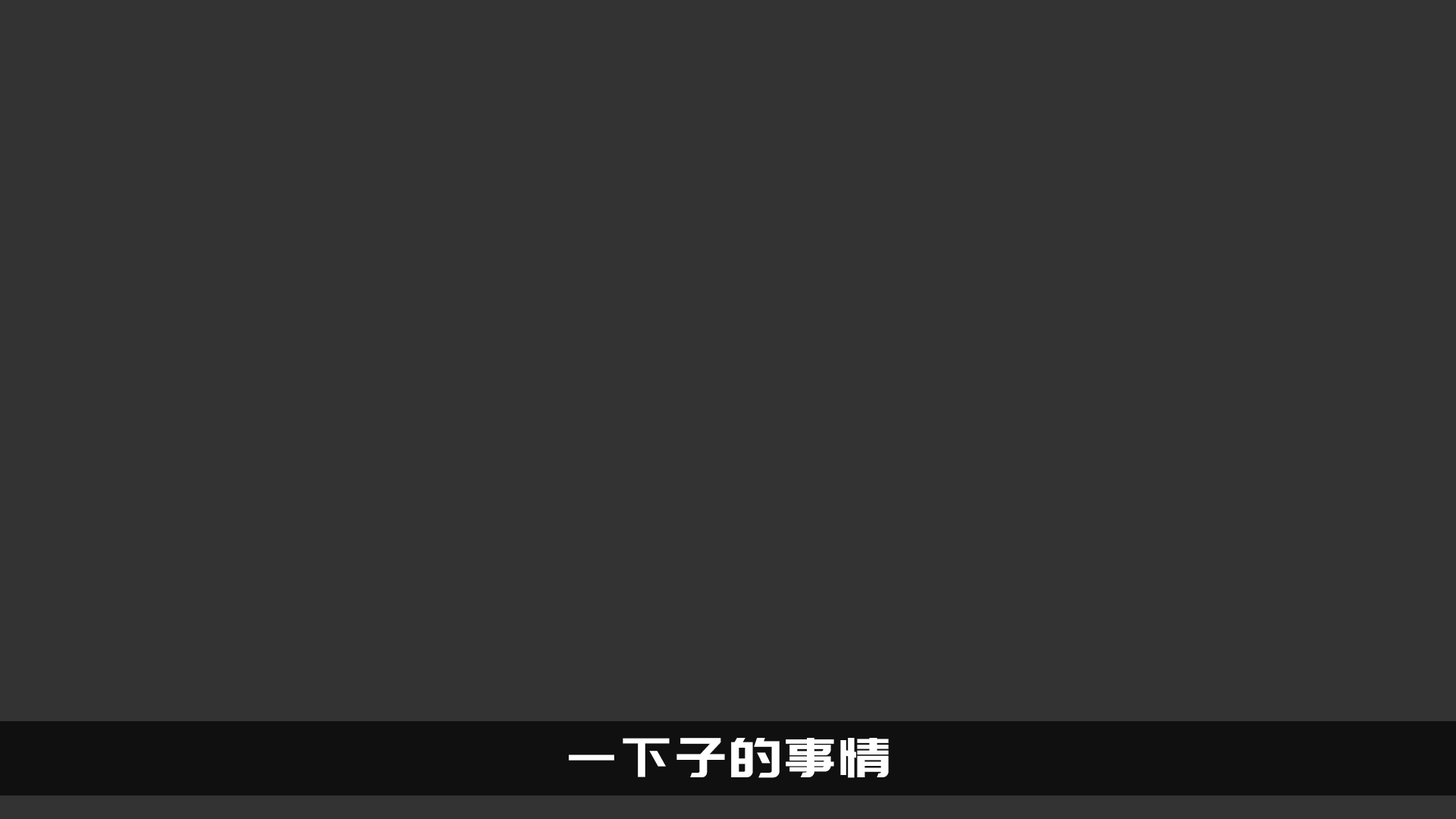
<style>
.page{position:relative;width:1456px;height:819px;background:#333333}
.page>*{position:absolute;margin:0}
.t1{font:54.6px "PangMenZhengDao-3";color:#ffffff}
</style>
<div class="page">
<p class="t1" style="left:569px;top:738px;width:320px;height:40px">一下子的事情</p>
</div>
